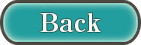
<style>
.page{position:relative;width:141px;height:45px}
.page>*{position:absolute;margin:0}
.t1{font:26px "RyuminPro-ExBold";color:#fff6f3}
</style>
<div class="page">
<p class="t1" style="left:40px;top:13px;width:61px;height:19px">Back</p>
</div>
